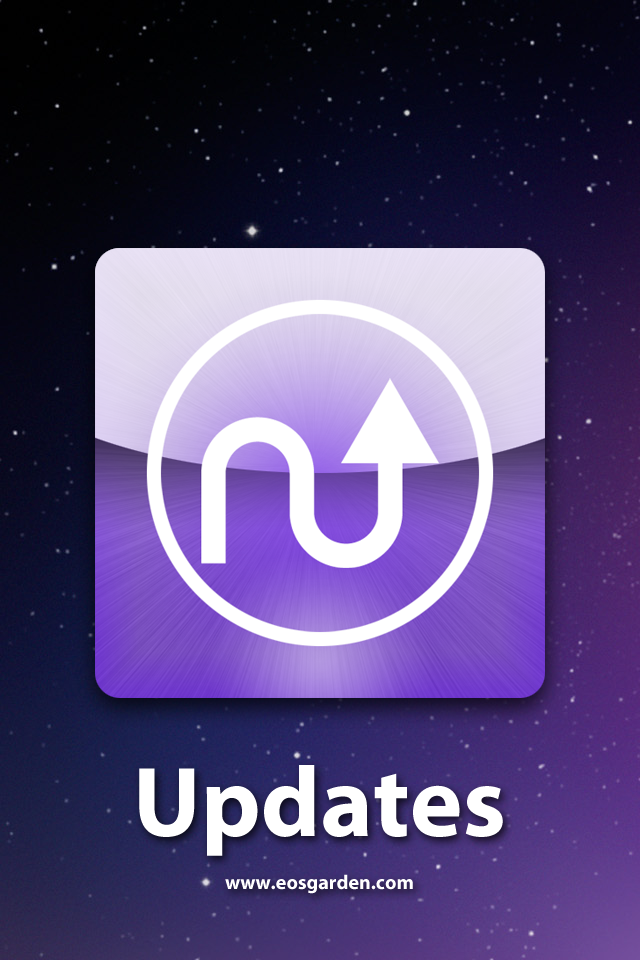
<style>
.page{position:relative;width:640px;height:960px}
.page>*{position:absolute;margin:0}
.t1{font:20px/120px "Myriad-Bold";color:#ffffff}
.t2{font:100px/120px "Myriad-Bold";color:#ffffff}
</style>
<div class="page">
<p class="t1" style="left:139px;top:765px;width:364px;height:129px;text-align:center"><span class="t2">Updates<br></span>www.eosgarden.com</p>
</div>
